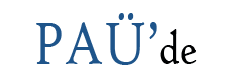
<style>
.page{position:relative;width:250px;height:80px;background:#ffffff}
.page>*{position:absolute;margin:0}
.t1{font:64.4px "HighTowerText-Reg";color:#1e548a;scale:0.81 1}
.t2{font:50px "HighTowerText-Reg";color:#000102;scale:0.81 1}
</style>
<div class="page">
<p class="t1" style="left:36px;top:13px;width:161px;height:52px">PAÜ’<span class="t2">de</span></p>
</div>
